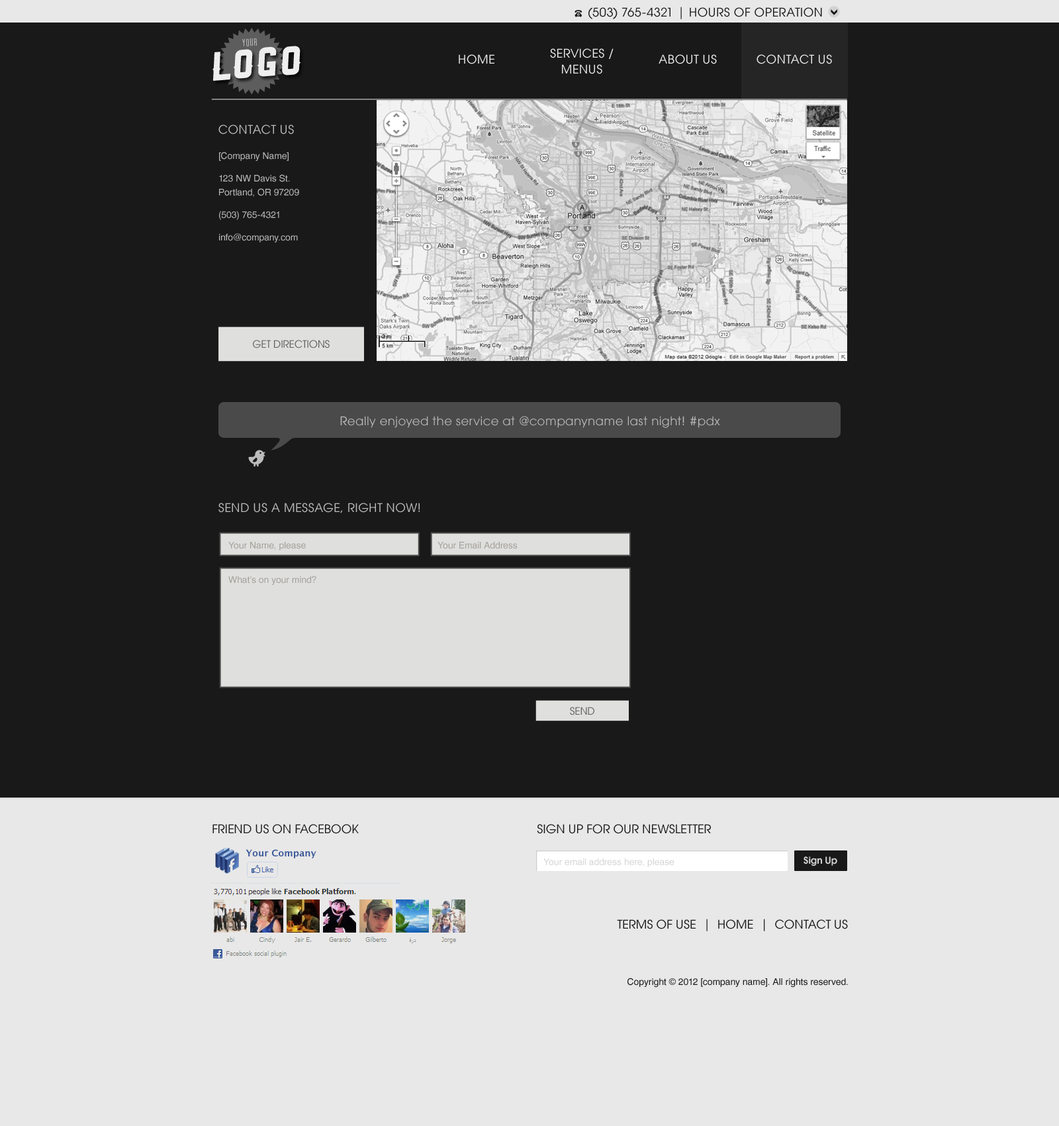
<style>
.page{position:relative;width:1059px;height:1126px;background:#1a1919}
.page>*{position:absolute;margin:0}
.t1{font:11.9px "AvantGardeCE-Book";letter-spacing:0.025em;color:#1a1919;text-transform:uppercase}
.t2{font:10.4px "ArvilSans";letter-spacing:0.05em;color:#c1c0c0}
.t3{font:38.7px "Ranger";letter-spacing:0.05em;color:#eeeeee}
.t4{font:11.9px/15.9px "AvantGardeCE-Book";letter-spacing:0.025em;color:#eeeeee;text-transform:uppercase}
.t5{font:11.9px "AvantGardeCE-Book";letter-spacing:0.025em;color:#eeeeee;text-transform:uppercase}
.t6{font:11.9px "AvantGardeCE-Book";letter-spacing:0.025em;color:#bcbcbc;text-transform:uppercase}
.t7{font:9.3px/13.9px "HelveticaCE-Regular";color:#bcbcbc}
.t8{font:9.9px "AvantGardeCE-Book";color:#5d5d5d;text-transform:uppercase}
.t9{font:11.9px "AvantGardeCE-Book";letter-spacing:0.025em;color:#bcbcbc}
.t10{font:9.3px "HelveticaCE-Regular";color:#a4a19a}
.t11{font:11.9px "AvantGardeCE-Book";color:#1a1919;text-transform:uppercase}
.t12{font:9.3px "LucidaSans-Demi";color:#3b5998}
.t13{font:9.3px "AvantGardeCE-Demi";color:#d5d5d5}
.t14{font:9.3px "HelveticaCE-Regular";color:#d5d5d5}
.t15{font:9.3px "HelveticaCE-Regular";color:#1a1919}
</style>
<div class="page">
<p class="t1" style="left:589px;top:7px;width:233px;height:12px">(503) 765-4321 | Hours of operation</p>
<p class="t2" style="left:242px;top:38px;width:15px;height:8px;rotate:-3deg">your</p>
<p class="t3" style="left:213px;top:46px;width:88px;height:35px;rotate:-4deg">Logo</p>
<p class="t4" style="left:550px;top:48px;width:64px;height:26px;text-align:center">Services /<br>Menus</p>
<p class="t5" style="left:459px;top:54px;width:36px;height:10px">Home</p>
<p class="t5" style="left:659px;top:54px;width:58px;height:10px">about us</p>
<p class="t5" style="left:757px;top:54px;width:75px;height:10px">contact us</p>
<p class="t6" style="left:218px;top:124px;width:76px;height:10px">Contact Us</p>
<p class="t7" style="left:219px;top:152px;width:80px;height:90px">[Company Name]<br>123 NW Davis St.<br>Portland, OR 97209<br>(503) 765-4321<br>info@company.com</p>
<p class="t8" style="left:253px;top:340px;width:77px;height:8px">get directions</p>
<p class="t9" style="left:340px;top:416px;width:380px;height:12px">Really enjoyed the service at @companyname last night! #pdx</p>
<p class="t6" style="left:218px;top:503px;width:202px;height:10px">Send us a message, right now!</p>
<p class="t10" style="left:228px;top:542px;width:78px;height:8px">Your Name, please</p>
<p class="t10" style="left:438px;top:542px;width:80px;height:7px">Your Email Address</p>
<p class="t10" style="left:228px;top:575px;width:88px;height:10px">What’s on your mind?</p>
<p class="t8" style="left:570px;top:706px;width:25px;height:9px">send</p>
<p class="t11" style="left:213px;top:824px;width:146px;height:10px">Friend us on Facebook</p>
<p class="t11" style="left:537px;top:824px;width:174px;height:10px">sign up for our newsletter</p>
<p class="t12" style="left:246px;top:849px;width:70px;height:9px">Your Company</p>
<p class="t13" style="left:804px;top:856px;width:34px;height:10px">Sign Up</p>
<p class="t14" style="left:544px;top:858px;width:131px;height:9px">Your email address here, please</p>
<p class="t11" style="left:617px;top:918px;width:231px;height:13px">Terms of Use  |  Home  |  Contact Us</p>
<p class="t15" style="left:628px;top:977px;width:220px;height:10px">Copyright © 2012 [company name]. All rights reserved.</p>
</div>
